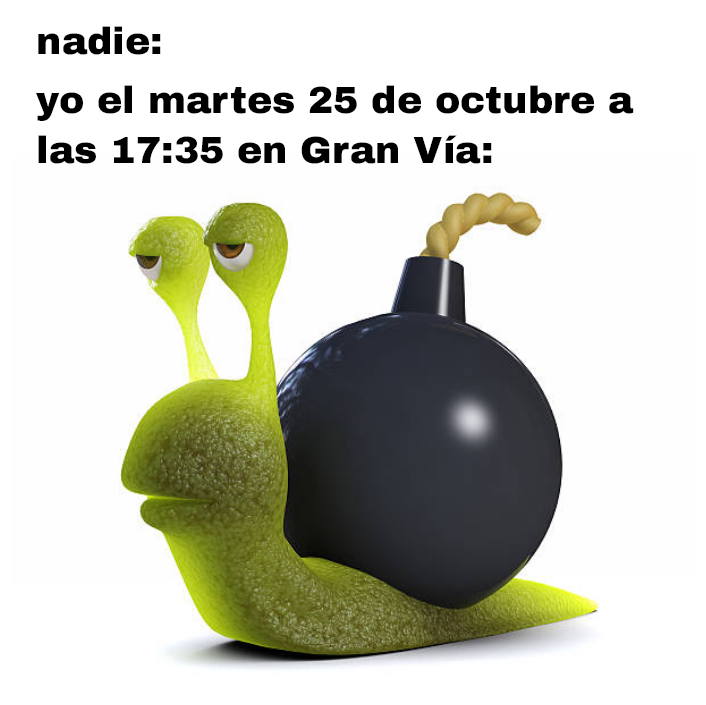
<style>
.page{position:relative;width:706px;height:705px;background:#fefefe}
.page>*{position:absolute;margin:0}
.t1{font:38px "ArchivoBlack-Regular";color:#000000}
</style>
<div class="page">
<p class="t1" style="left:36px;top:26px;width:598px;height:138px">nadie:<br>yo el martes 25 de octubre a<br>las 17:35 en Gran Vía:</p>
</div>
